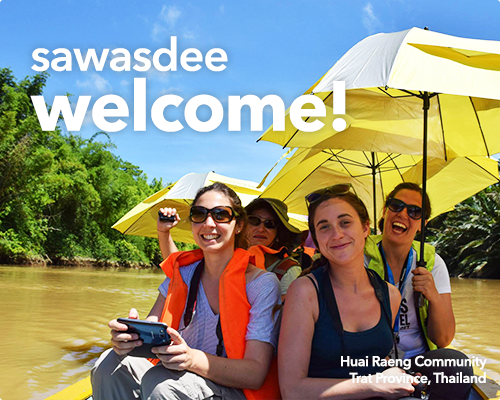
<style>
.page{position:relative;width:500px;height:400px}
.page>*{position:absolute;margin:0}
.t1{font:45.2px/60px "AvenirNext-DemiBold";letter-spacing:-0.025em;color:#ffffff}
.t2{font:69.9px/60px "AvenirNext-Bold";letter-spacing:-0.025em;color:#ffffff}
.t3{font:14px "AvenirNext-DemiBold";letter-spacing:-0.025em;color:#ffffff}
</style>
<div class="page">
<p class="t1" style="left:30px;top:36px;width:317px;height:96px">sawasdee<br><span class="t2">welcome!</span></p>
<p class="t3" style="left:341px;top:355px;width:146px;height:30px;text-align:right">Huai Raeng Community<br>Trat Province, Thailand</p>
</div>
